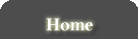
<style>
.page{position:relative;width:138px;height:39px;background:#4d4d4d}
.page>*{position:absolute;margin:0}
.t1{font:18px "BellMTBold";color:#ffffff}
</style>
<div class="page">
<p class="t1" style="left:46px;top:18px;width:47px;height:13px">Home</p>
</div>
